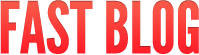
<style>
.page{position:relative;width:199px;height:55px;background:#ffffff}
.page>*{position:absolute;margin:0}
.t1{font:71.3px "LeagueGothic";text-transform:uppercase}
</style>
<div class="page">
<p class="t1" style="left:0px;top:0px;width:199px;height:54px">fast Blog</p>
</div>
